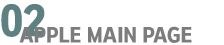
<style>
.page{position:relative;width:224px;height:45px;background:#ffffff}
.page>*{position:absolute;margin:0}
.t1{font:40px "KoreanTITGD5-R";color:#5d8080}
.t2{font:19.6px "KoreanTITGD5-R";color:#7d7c7c}
</style>
<div class="page">
<p class="t1" style="left:1px;top:4px;width:44px;height:33px">02</p>
<p class="t2" style="left:19px;top:26px;width:173px;height:17px">APPLE MAIN PAGE</p>
</div>
